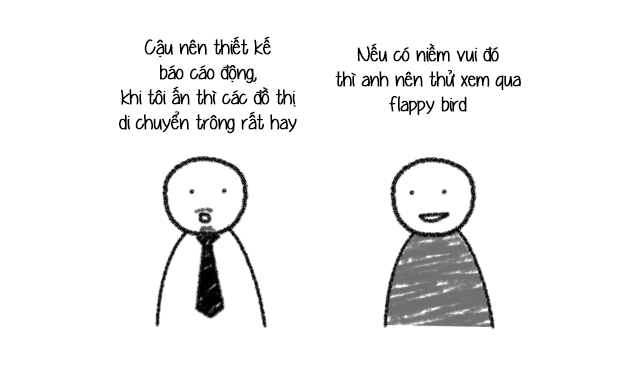
<style>
.page{position:relative;width:617px;height:375px;background:#ffffff}
.page>*{position:absolute;margin:0}
.t1{font:20.8px "UVFYummyCupcakes";letter-spacing:-0.02em;color:#000000;font-weight:bold}
</style>
<div class="page">
<p class="t1" style="left:119px;top:36px;width:178px;height:98px;text-align:center">Cậu nên thiết kế<br>báo cáo động,<br>khi tôi ấn thì các đồ thị<br>di chuyển trông rất hay</p>
<p class="t1" style="left:335px;top:43px;width:186px;height:72px;text-align:center">Nếu có niềm vui đó<br>thì anh nên thử xem qua<br>flappy bird</p>
</div>
